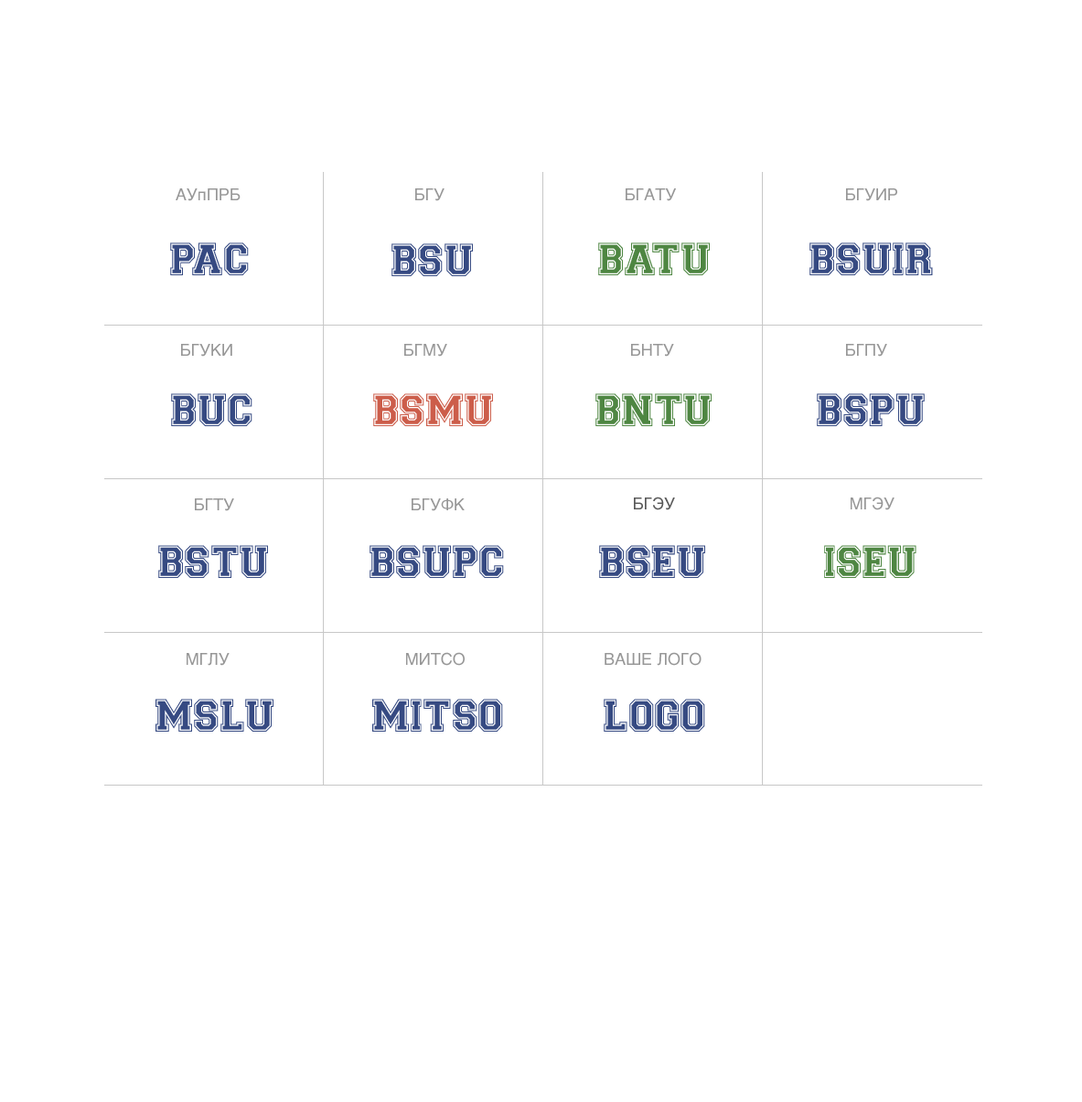
<style>
.page{position:relative;width:1082px;height:1102px;background:#ffffff}
.page>*{position:absolute;margin:0}
.t1{font:16.5px "Helvetica";color:#979797}
.t2{font:43.9px "CollegiateHeavyOutline-Medium";color:#364a82}
.t3{font:43.9px "CollegiateHeavyOutline-Medium";color:#4e8642}
.t4{font:43.9px "CollegiateHeavyOutline-Medium";color:#364a82;text-transform:uppercase}
.t5{font:43.9px "CollegiateHeavyOutline-Medium";color:#cc5d4a;text-transform:uppercase}
.t6{font:43.9px "CollegiateHeavyOutline-Medium";color:#4e8642;text-transform:uppercase}
.t7{font:16.5px "Helvetica";color:#595959}
</style>
<div class="page">
<p class="t1" style="left:176px;top:188px;width:65px;height:13px">АУпПРБ</p>
<p class="t1" style="left:415px;top:188px;width:29px;height:13px">БГУ</p>
<p class="t1" style="left:626px;top:188px;width:50px;height:13px">БГАТУ</p>
<p class="t1" style="left:846px;top:188px;width:51px;height:13px">БГУИР</p>
<p class="t2" style="left:170px;top:242px;width:79px;height:33px">PAC</p>
<p class="t2" style="left:391px;top:243px;width:82px;height:33px">BSU</p>
<p class="t3" style="left:598px;top:242px;width:112px;height:33px">BATU</p>
<p class="t4" style="left:809px;top:242px;width:124px;height:33px">bsuir</p>
<p class="t1" style="left:181px;top:344px;width:51px;height:13px">БГУКИ</p>
<p class="t1" style="left:404px;top:344px;width:43px;height:13px">БГМУ</p>
<p class="t1" style="left:631px;top:344px;width:43px;height:13px">БНТУ</p>
<p class="t1" style="left:846px;top:344px;width:41px;height:13px">БГПУ</p>
<p class="t4" style="left:171px;top:393px;width:81px;height:33px">buC</p>
<p class="t5" style="left:373px;top:393px;width:120px;height:33px">bSMU</p>
<p class="t6" style="left:595px;top:393px;width:117px;height:33px">bntu</p>
<p class="t4" style="left:817px;top:393px;width:108px;height:33px">bspu</p>
<p class="t7" style="left:634px;top:497px;width:41px;height:13px">БГЭУ</p>
<p class="t1" style="left:851px;top:497px;width:43px;height:13px">МГЭУ</p>
<p class="t1" style="left:195px;top:498px;width:39px;height:13px">БГТУ</p>
<p class="t1" style="left:412px;top:498px;width:53px;height:13px">БГУФК</p>
<p class="t4" style="left:158px;top:545px;width:110px;height:33px">bstu</p>
<p class="t4" style="left:369px;top:545px;width:135px;height:33px">bsupc</p>
<p class="t2" style="left:599px;top:545px;width:106px;height:33px">BSEU</p>
<p class="t6" style="left:824px;top:545px;width:92px;height:33px">iseu</p>
<p class="t1" style="left:187px;top:653px;width:43px;height:13px">МГЛУ</p>
<p class="t1" style="left:406px;top:652px;width:59px;height:14px">МИТСО</p>
<p class="t1" style="left:605px;top:652px;width:96px;height:14px">ВАШЕ ЛОГО</p>
<p class="t4" style="left:155px;top:699px;width:118px;height:33px">MSLU</p>
<p class="t4" style="left:372px;top:699px;width:131px;height:33px">mitso</p>
<p class="t4" style="left:604px;top:699px;width:101px;height:33px">LOGO</p>
</div>
